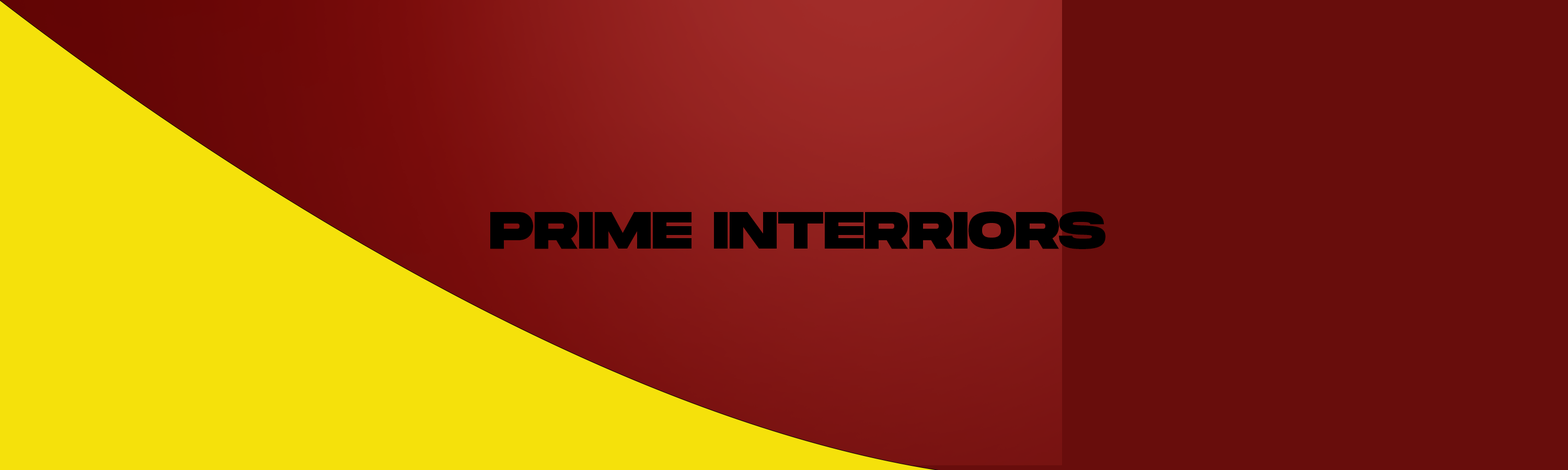
<style>
.page{position:relative;width:1568px;height:470px;background:#680d0c}
.page>*{position:absolute;margin:0}
.t1{font:52.3px "MonumentExtended-Ultrabold";color:#000000}
</style>
<div class="page">
<p class="t1" style="left:490px;top:212px;width:615px;height:37px">PRIME INTERRIORS</p>
</div>
